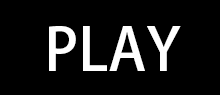
<style>
.page{position:relative;width:220px;height:95px;background:#000000}
.page>*{position:absolute;margin:0}
.t1{font:58.3px "AdobeFanHeitiStd-Bold";color:#ffffff}
</style>
<div class="page">
<p class="t1" style="left:49px;top:26px;width:132px;height:45px">PLAY</p>
</div>
